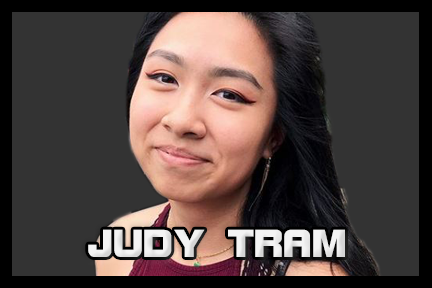
<style>
.page{position:relative;width:432px;height:288px;background:#333333}
.page>*{position:absolute;margin:0}
.t1{font:41.7px "BolsterBold";color:#f3f3f3}
</style>
<div class="page">
<p class="t1" style="left:88px;top:229px;width:257px;height:28px">JUDY TRAM</p>
</div>
